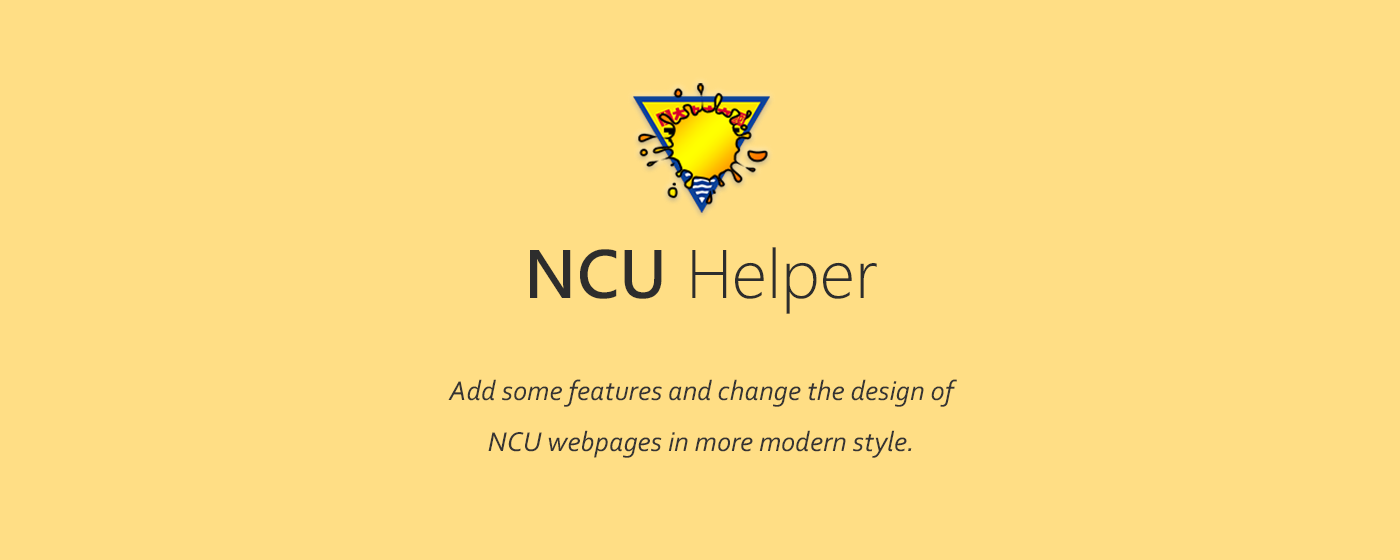
<style>
.page{position:relative;width:1400px;height:560px;background:#ffde85}
.page>*{position:absolute;margin:0}
.t1{font:63.4px "MicrosoftJhengHeiLight";color:#2d2d2d}
.t2{font:63.4px "MicrosoftJhengHeiBold";color:#2d2d2d}
.t3{font:28.6px "Corbel-Italic";color:#353434}
</style>
<div class="page">
<p class="t1" style="left:530px;top:247px;width:347px;height:67px"><span class="t2">NCU</span> Helper</p>
<p class="t3" style="left:448px;top:379px;width:509px;height:79px;text-align:center">Add some features and change the design of<br>NCU webpages in more modern style.</p>
</div>
